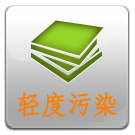
<style>
.page{position:relative;width:135px;height:135px}
.page>*{position:absolute;margin:0}
.t1{font:26px "STFangsong";letter-spacing:0.1em;color:#ff7e00;font-weight:bold}
</style>
<div class="page">
<p class="t1" style="left:17px;top:91px;width:100px;height:27px">轻度污染</p>
</div>
